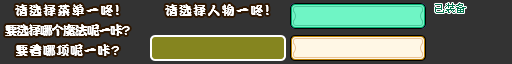
<style>
.page{position:relative;width:512px;height:64px;background:#333333}
.page>*{position:absolute;margin:0}
.t1{font:13px "DFPKanTingLiuW9";letter-spacing:0.1em;color:#ffffff}
.t2{font:15px "DFPKanTingLiuW9";letter-spacing:0.1em;color:#ffffff}
.t3{font:11px "ZpixEX2";color:#017149}
.t4{font:13px "DFPKanTingLiuW9";letter-spacing:-0.1em;color:#ffffff}
.t5{font:13px "DFPKanTingLiuW9";letter-spacing:0.05em;color:#ffffff}
</style>
<div class="page">
<p class="t1" style="left:15px;top:4px;width:104px;height:12px">请选择菜单一咚<span class="t2">!</span></p>
<p class="t1" style="left:165px;top:4px;width:104px;height:12px">请选择人物一咚<span class="t2">!</span></p>
<p class="t3" style="left:435px;top:3px;width:31px;height:10px">已装备</p>
<p class="t4" style="left:5px;top:24px;width:125px;height:12px">要选择哪个魔法呢一咔?</p>
<p class="t5" style="left:16px;top:44px;width:103px;height:12px">要看哪项呢一咔?</p>
</div>
